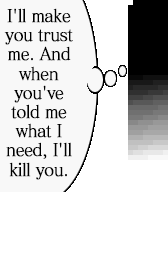
<style>
.page{position:relative;width:168px;height:256px;background:#ffffff}
.page>*{position:absolute;margin:0}
.t1{font:17.6px "MatissePro-M";letter-spacing:-0.05em;color:#000000;font-weight:bold;scale:0.91 1}
</style>
<div class="page">
<p class="t1" style="left:4px;top:8px;width:69px;height:172px;text-align:center">I'll make<br>you trust<br>me. And<br>when<br>you've<br>told me<br>what I<br>need, I'll<br>kill you.</p>
</div>
